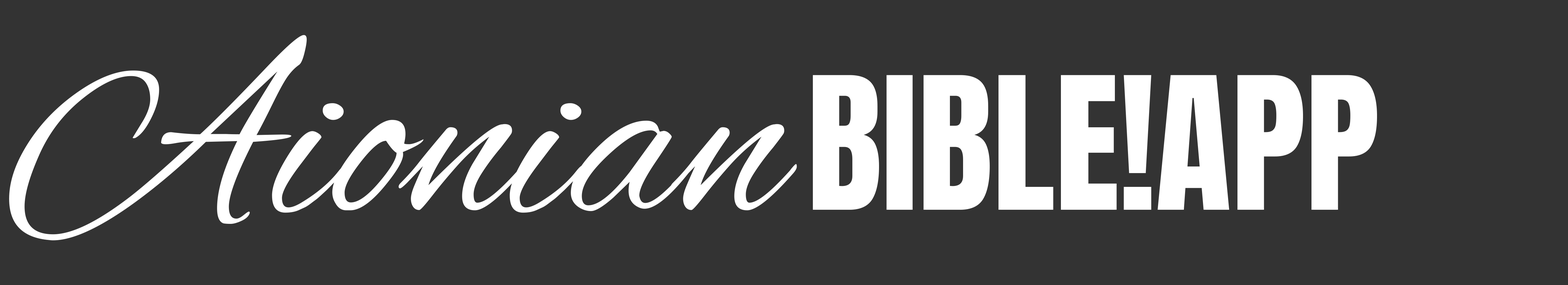
<style>
.page{position:relative;width:1568px;height:285px;background:#333333}
.page>*{position:absolute;margin:0}
.t1{font:261.3px "AlexBrush-Regular";color:#ffffff}
.t2{font:156.8px "Anton-Regular";color:#ffffff}
</style>
<div class="page">
<p class="t1" style="left:9px;top:35px;width:788px;height:206px">Aionian</p>
<p class="t2" style="left:813px;top:75px;width:564px;height:135px">BIBLE!APP</p>
</div>
